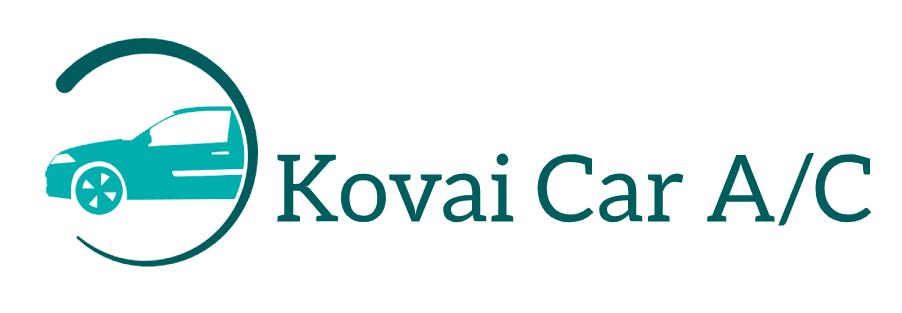
<style>
.page{position:relative;width:902px;height:313px;background:#ffffff}
.page>*{position:absolute;margin:0}
.t1{font:93px "Aleo-Regular";color:#005d5d}
</style>
<div class="page">
<p class="t1" style="left:277px;top:153px;width:595px;height:73px">Kovai Car A/C</p>
</div>
